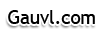
<style>
.page{position:relative;width:100px;height:30px;background:#ffffff}
.page>*{position:absolute;margin:0}
.t1{font:18.5px "TrebuchetMS";color:#000000}
</style>
<div class="page">
<p class="t1" style="left:8px;top:10px;width:87px;height:14px">Gauvl.com</p>
</div>
